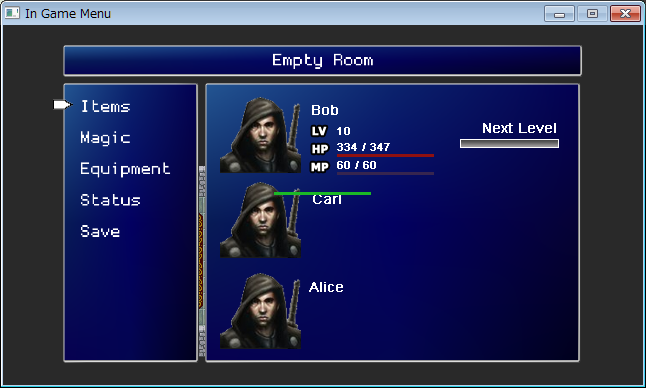
<style>
.page{position:relative;width:646px;height:388px;background:#292929}
.page>*{position:absolute;margin:0}
.t1{font:14px "ArialMT";color:#ffffff;font-weight:bold}
.t2{font:11px "ArialMT";color:#ffffff;font-weight:bold}
.t3{font:11px "Tahoma-Bold";color:#ffffff;font-weight:bold}
</style>
<div class="page">
<p class="t1" style="left:312px;top:105px;width:26px;height:10px">Bob</p>
<p class="t1" style="left:483px;top:123px;width:73px;height:10px">Next Level</p>
<p class="t2" style="left:337px;top:127px;width:13px;height:8px">10</p>
<p class="t3" style="left:312px;top:144px;width:16px;height:10px">HP</p>
<p class="t2" style="left:337px;top:143px;width:53px;height:8px">334 / 347</p>
<p class="t2" style="left:337px;top:161px;width:39px;height:8px">60 / 60</p>
<p class="t3" style="left:311px;top:162px;width:18px;height:10px">MP</p>
<p class="t1" style="left:313px;top:194px;width:28px;height:10px">Carl</p>
<p class="t1" style="left:309px;top:282px;width:34px;height:10px">Alice</p>
</div>
